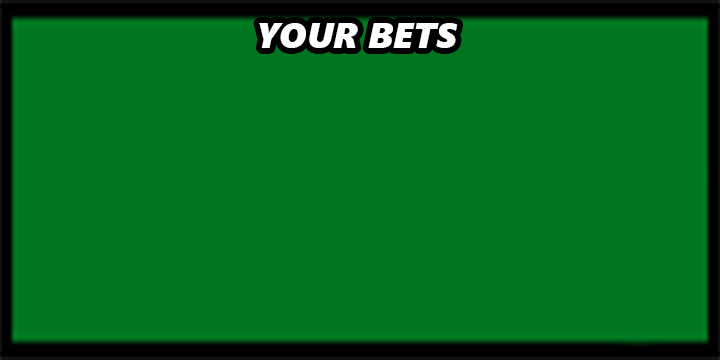
<style>
.page{position:relative;width:720px;height:360px;background:#007520}
.page>*{position:absolute;margin:0}
.t1{font:36px "SegoeUIBlack-Italic";color:#ffffff}
</style>
<div class="page">
<p class="t1" style="left:259px;top:23px;width:199px;height:25px">YOUR BETS</p>
</div>
